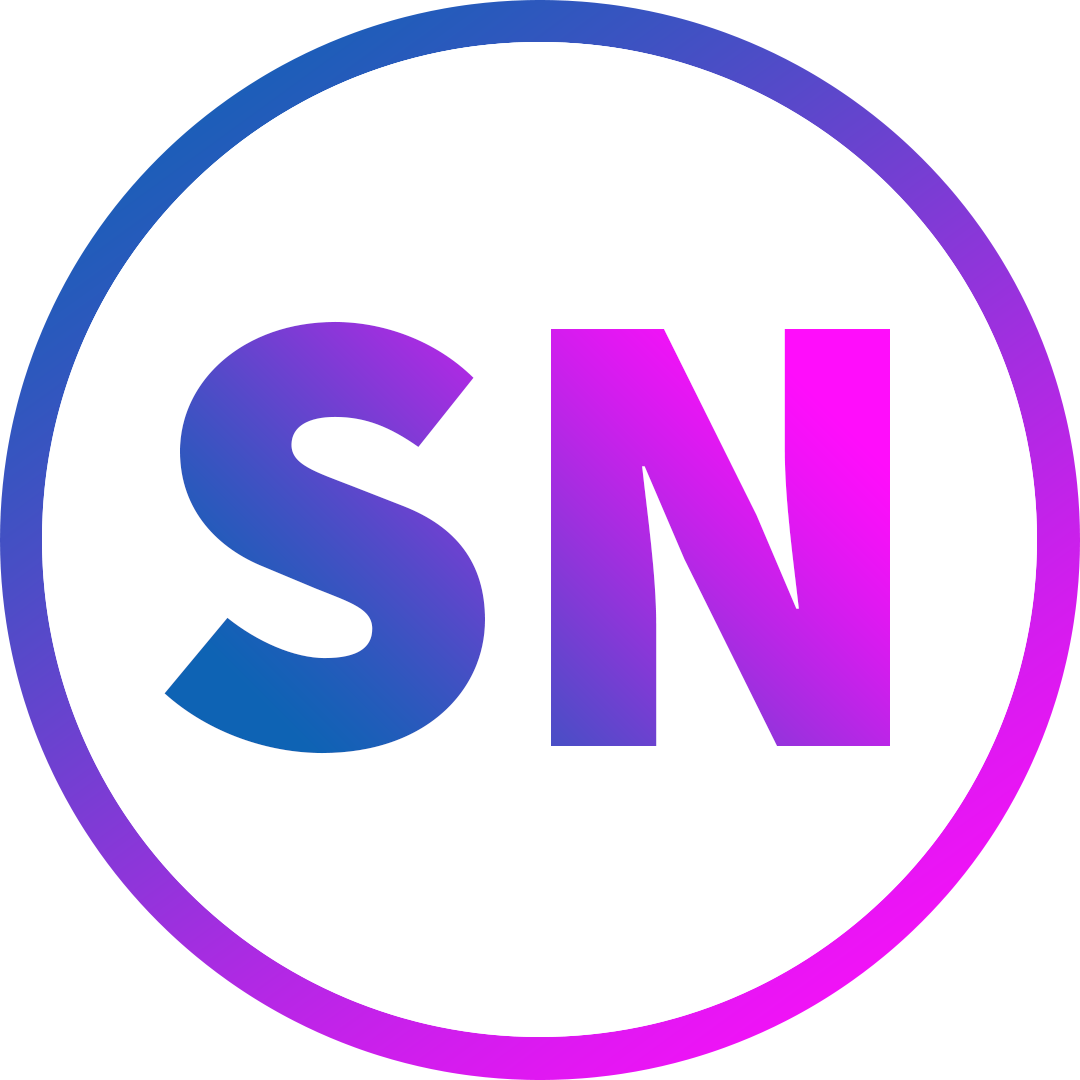
<style>
.page{position:relative;width:1080px;height:1080px;background:#ffffff}
.page>*{position:absolute;margin:0}
.t1{font:641.1px "SourceSansPro-Black"}
</style>
<div class="page">
<p class="t1" style="left:164px;top:321px;width:726px;height:433px">SN</p>
</div>
